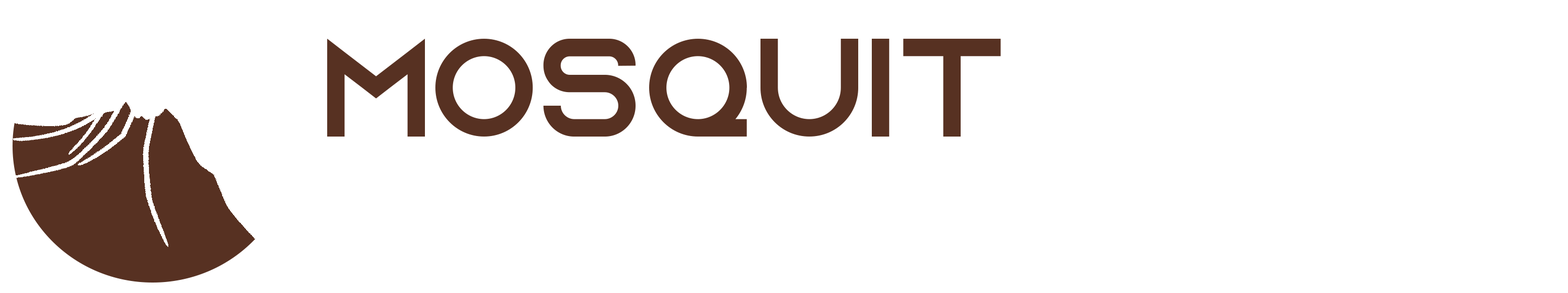
<style>
.page{position:relative;width:1568px;height:293px;background:#ffffff}
.page>*{position:absolute;margin:0}
.t1{font:139.5px/118.8px "AzonixRegular";color:#573122}
.t2{font:139.5px/118.8px "AzonixRegular";color:#ffffff}
</style>
<div class="page">
<p class="t1" style="left:327px;top:39px;width:1216px;height:217px;text-align:center">Mosquit<br>      <span class="t2">     Arrest</span></p>
</div>
